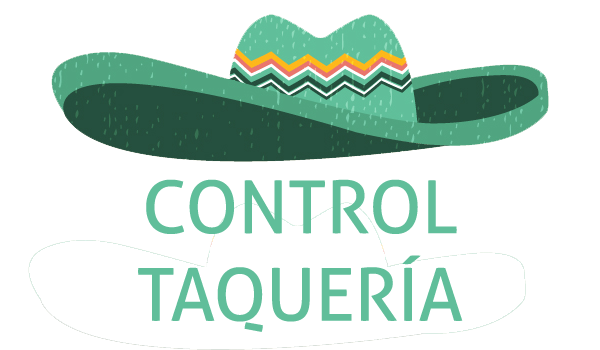
<style>
.page{position:relative;width:600px;height:350px;background:#ffffff}
.page>*{position:absolute;margin:0}
.t1{font:72.9px "Aller";color:#60be9a}
</style>
<div class="page">
<p class="t1" style="left:138px;top:179px;width:325px;height:153px;text-align:center">CONTROL<br>TAQUERÍA</p>
</div>
